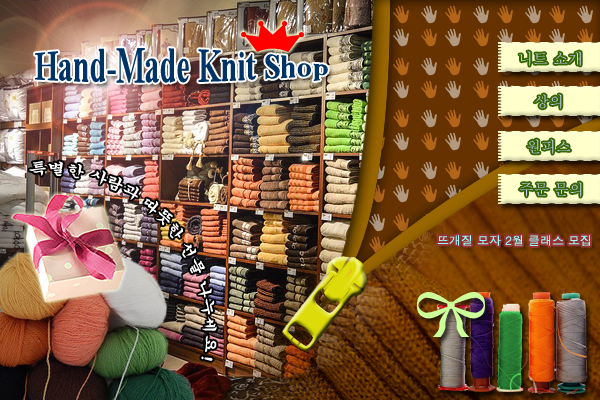
<style>
.page{position:relative;width:600px;height:400px}
.page>*{position:absolute;margin:0}
.t1{font:30px "TimesNewRomanPS-BoldMT";color:#003366}
.t2{font:15px "Batang";color:#ccccff}
.t3{font:12px "Dotum";color:#99ffff}
</style>
<div class="page">
<p class="t1" style="left:35px;top:48px;width:293px;height:35px">Hand-Made Knit Shop</p>
<p class="t2" style="left:534px;top:94px;width:28px;height:15px">상의</p>
<p class="t2" style="left:527px;top:139px;width:44px;height:15px">원피스</p>
<p class="t2" style="left:519px;top:182px;width:63px;height:15px">주문 문의</p>
<p class="t3" style="left:437px;top:235px;width:153px;height:11px">뜨개질 모자 2월 클래스 모집</p>
</div>
